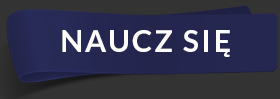
<style>
.page{position:relative;width:280px;height:99px;background:#333333}
.page>*{position:absolute;margin:0}
.t1{font:30px "Lato-Bold";letter-spacing:0.075em;color:#ffffff}
</style>
<div class="page">
<p class="t1" style="left:62px;top:30px;width:168px;height:27px">NAUCZ SIĘ</p>
</div>
